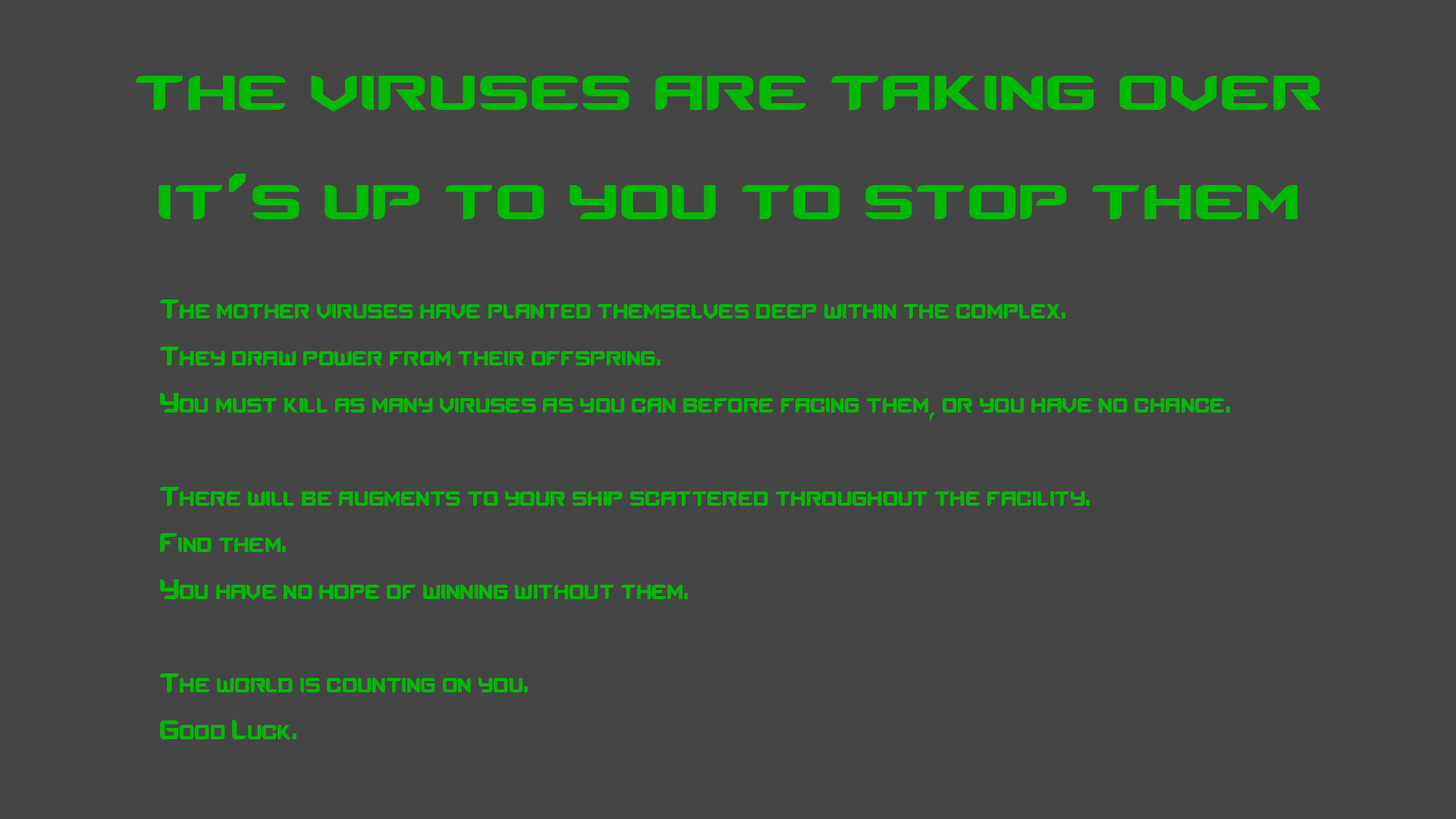
<style>
.page{position:relative;width:1456px;height:819px;background:#454545}
.page>*{position:absolute;margin:0}
.t1{font:91px "Counter-StrikeRegular";color:#00ba01}
.t2{font:38.9px "Counter-StrikeRegular";color:#00ba01;scale:0.7 1}
</style>
<div class="page">
<p class="t1" style="left:136px;top:76px;width:1185px;height:35px">the viruses are taking over</p>
<p class="t1" style="left:158px;top:174px;width:1139px;height:45px">it’s up to you to stop them</p>
<p class="t2" style="left:160px;top:300px;width:1070px;height:439px">The mother viruses have planted themselves deep within the complex.<br>They draw power from their offspring.<br>You must kill as many viruses as you can before facing them, or you have no chance.<br><br>There will be augments to your ship scattered throughout the facility.<br>Find them.<br>You have no hope of winning without them.<br><br>The world is counting on you.<br>Good Luck.</p>
</div>
